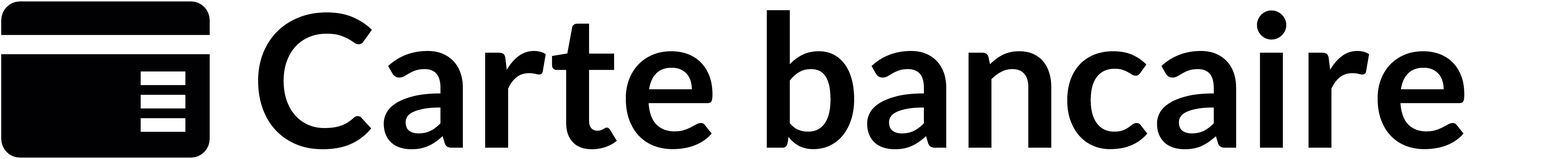
<style>
.page{position:relative;width:1568px;height:159px;background:#ffffff}
.page>*{position:absolute;margin:0}
.t1{font:184.8px "Lato-Bold";color:#000000}
</style>
<div class="page">
<p class="t1" style="left:258px;top:10px;width:1207px;height:139px">Carte bancaire</p>
</div>
